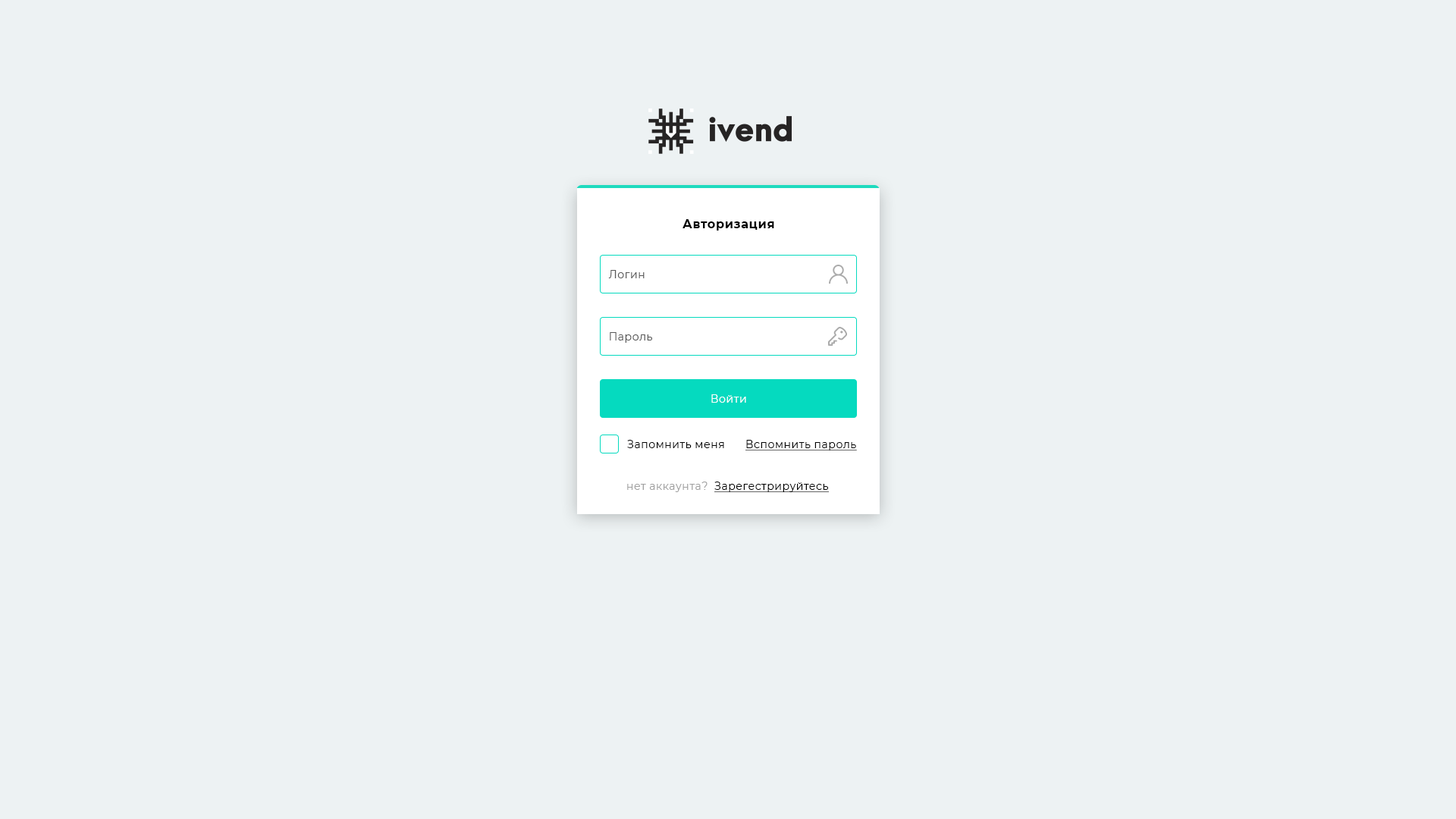
<style>
.page{position:relative;width:1456px;height:819px;background:#edf2f3}
.page>*{position:absolute;margin:0}
.t1{font:12.1px "Montserrat-Bold";letter-spacing:0.04em;color:#000000}
.t2{font:10.6px "Montserrat-Regular";letter-spacing:0.04em;color:#585858}
.t3{font:10.6px "Montserrat-Regular";letter-spacing:0.04em;color:#ffffff}
.t4{font:10.6px "Montserrat-Regular";letter-spacing:0.04em;color:#000000}
.t5{font:10.6px "Montserrat-Regular";letter-spacing:0.04em;color:#000000;text-decoration:underline}
.t6{font:10.6px "Montserrat-Regular";letter-spacing:0.04em;color:#a1a1a1}
</style>
<div class="page">
<p class="t1" style="left:682px;top:219px;width:92px;height:12px">Авторизация</p>
<p class="t2" style="left:608px;top:270px;width:37px;height:8px">Логин</p>
<p class="t2" style="left:610px;top:332px;width:42px;height:11px">Пароль</p>
<p class="t3" style="left:711px;top:394px;width:35px;height:9px">Войти</p>
<p class="t4" style="left:627px;top:440px;width:97px;height:8px">Запомнить меня</p>
<p class="t5" style="left:745px;top:440px;width:112px;height:10px">Вспомнить пароль</p>
<p class="t6" style="left:627px;top:482px;width:81px;height:10px">нет аккаунта?</p>
<p class="t5" style="left:714px;top:482px;width:115px;height:10px">Зарегестрируйтесь</p>
</div>
